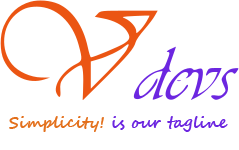
<style>
.page{position:relative;width:239px;height:150px;background:#ffffff}
.page>*{position:absolute;margin:0}
.t1{font:16px "SegoeScript-Bold";color:#6c26e0}
.t2{font:16px "SegoeScript-Bold";color:#e3701c}
</style>
<div class="page">
<p class="t1" style="left:9px;top:116px;width:219px;height:16px"><span class="t2">Simplicity! </span>is our tagline</p>
</div>
